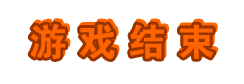
<style>
.page{position:relative;width:244px;height:84px;background:#ffffff}
.page>*{position:absolute;margin:0}
.t1{font:38px "Jdahei";letter-spacing:0.3em;color:#ff6400}
.t2{font:38px "Jdahei";letter-spacing:0.3em}
</style>
<div class="page">
<p class="t1" style="left:30px;top:24px;width:184px;height:35px">游戏结束</p>
<p class="t2" style="left:32px;top:21px;width:184px;height:35px">游戏结束</p>
</div>
